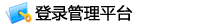
<style>
.page{position:relative;width:200px;height:25px;background:#ffffff}
.page>*{position:absolute;margin:0}
.t1{font:16px "MicrosoftYaHei";letter-spacing:0.01em;color:#000000}
</style>
<div class="page">
<p class="t1" style="left:35px;top:5px;width:98px;height:16px">登录管理平台</p>
</div>
